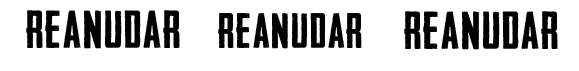
<style>
.page{position:relative;width:579px;height:71px;background:#ffffff}
.page>*{position:absolute;margin:0}
.t1{font:50.5px "HeadlinerNo.45";letter-spacing:0.04em;color:#010101}
.t2{font:47px "HeadlinerNo.45";letter-spacing:0.04em;color:#010101}
</style>
<div class="page">
<p class="t1" style="left:26px;top:10px;width:154px;height:39px">REANUDAR</p>
<p class="t2" style="left:218px;top:13px;width:144px;height:36px">REANUDAR</p>
<p class="t1" style="left:404px;top:11px;width:154px;height:39px">REANUDAR</p>
</div>
